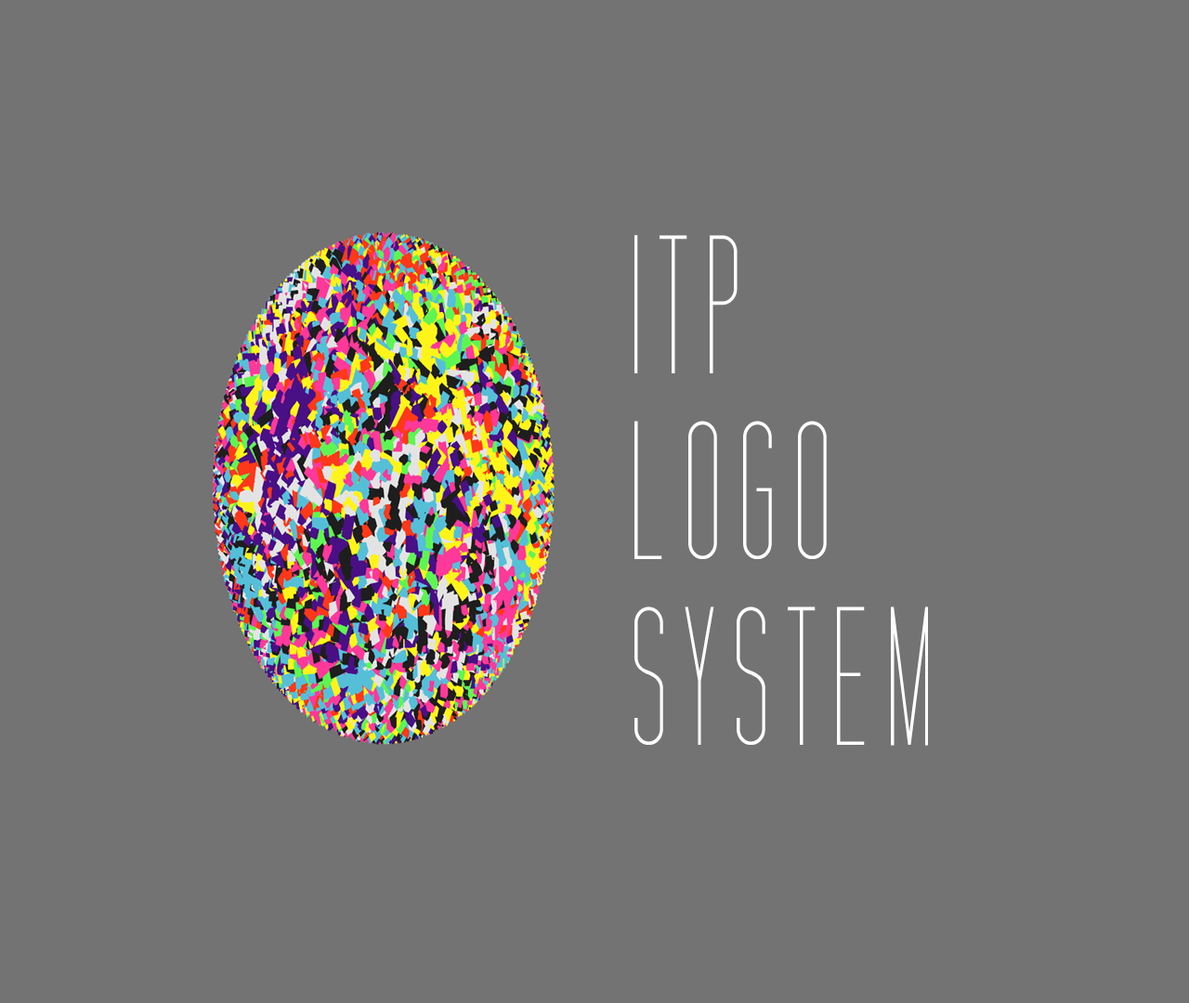
<style>
.page{position:relative;width:1189px;height:1003px;background:#737373}
.page>*{position:absolute;margin:0}
.t1{font:199.7px/185.8px "TallFilmsExpanded";letter-spacing:0.1em;color:#fffefe;scale:0.67 1}
</style>
<div class="page">
<p class="t1" style="left:634px;top:235px;width:294px;height:511px">ITP<br>LOGO<br>SYSTEM</p>
</div>
